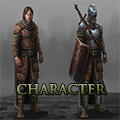
<style>
.page{position:relative;width:120px;height:120px}
.page>*{position:absolute;margin:0}
.t1{font:13px "TrajanPro-Bold"}
</style>
<div class="page">
<p class="t1" style="left:17px;top:84px;width:90px;height:11px">CHARACTER</p>
</div>
